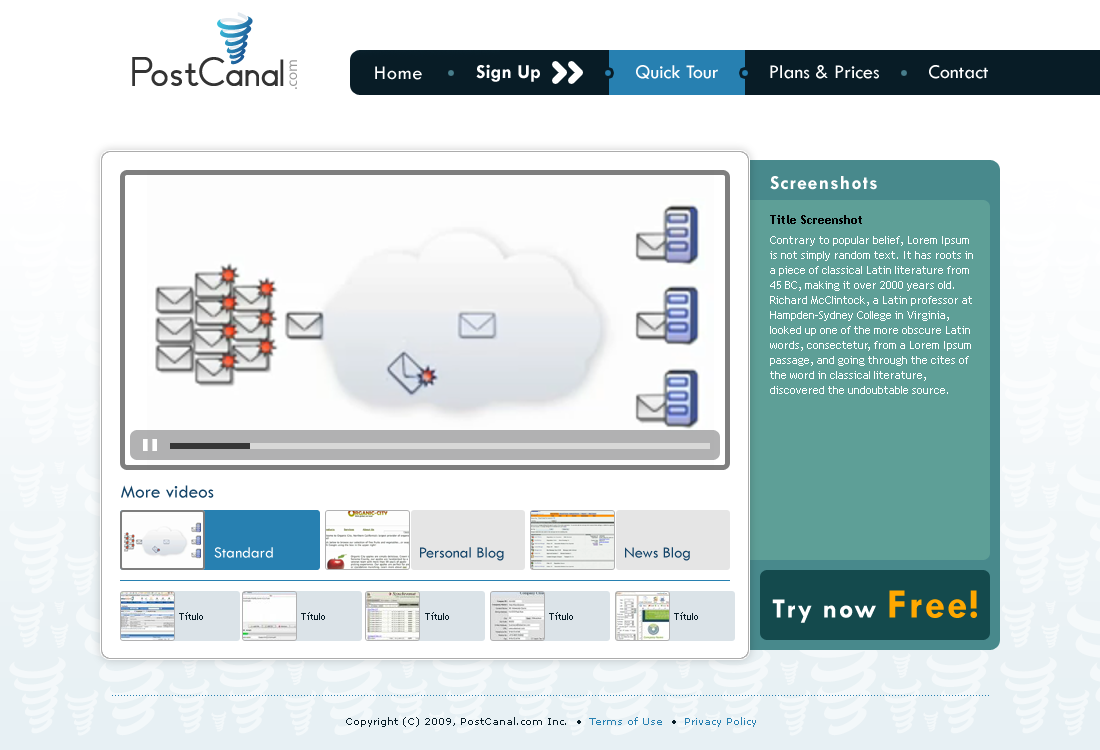
<style>
.page{position:relative;width:1100px;height:750px;background:#ffffff}
.page>*{position:absolute;margin:0}
.t1{font:20px "TwCenMT-Bold";color:#ffffff}
.t2{font:20px "TwCenMT-Regular";color:#ffffff}
.t3{font:20px "TwCenMT-Regular";letter-spacing:0.05em;color:#ffffff}
.t4{font:20px "TwCenMT-Bold";letter-spacing:0.05em;color:#ffffff}
.t5{font:12px "TrebuchetMS-Bold";color:#000000}
.t6{font:11px/15px "TrebuchetMS";color:#ffffff}
.t7{font:19px "TwCenMT-Regular";color:#124368}
.t8{font:16px "TwCenMT-Regular";color:#ffffff}
.t9{font:16px "TwCenMT-Regular";color:#124368}
.t10{font:28px "TwCenMT-Bold";letter-spacing:0.05em;color:#ffffff}
.t11{font:42px "TwCenMT-Bold";letter-spacing:0.05em;color:#ffa800}
.t12{font:10px "TrebuchetMS";color:#081c26}
.t13{font:10px "Verdana";color:#081c26}
.t14{font:10px "Verdana";color:#2780b1}
</style>
<div class="page">
<p class="t1" style="left:476px;top:64px;width:64px;height:18px">Sign Up</p>
<p class="t2" style="left:636px;top:65px;width:82px;height:14px">Quick Tour</p>
<p class="t2" style="left:770px;top:65px;width:109px;height:14px">Plans &amp; Prices</p>
<p class="t2" style="left:929px;top:65px;width:59px;height:14px">Contact</p>
<p class="t3" style="left:375px;top:66px;width:47px;height:14px">Home</p>
<p class="t4" style="left:770px;top:176px;width:107px;height:14px">Screenshots</p>
<p class="t5" style="left:770px;top:215px;width:92px;height:9px">Title Screenshot</p>
<p class="t6" style="left:770px;top:236px;width:203px;height:158px">Contrary to popular belief, Lorem Ipsum is not simply random text. It has roots in a piece of classical Latin literature from 45 BC, making it over 2000 years old. Richard McClintock, a Latin professor at Hampden-Sydney College in Virginia, looked up one of the more obscure Latin words, consectetur, from a Lorem Ipsum passage, and going through the cites of the word in classical literature, discovered the undoubtable source.</p>
<p class="t7" style="left:121px;top:485px;width:93px;height:13px">More videos</p>
<p class="t8" style="left:214px;top:547px;width:59px;height:11px">Standard</p>
<p class="t9" style="left:420px;top:547px;width:84px;height:14px">Personal Blog</p>
<p class="t9" style="left:625px;top:547px;width:65px;height:14px">News Blog</p>
<p class="t10" style="left:772px;top:590px;width:205px;height:33px">Try now <span class="t11">Free!</span></p>
<p class="t12" style="left:179px;top:612px;width:24px;height:8px">Título</p>
<p class="t12" style="left:301px;top:612px;width:24px;height:8px">Título</p>
<p class="t12" style="left:425px;top:612px;width:24px;height:8px">Título</p>
<p class="t12" style="left:549px;top:612px;width:24px;height:8px">Título</p>
<p class="t12" style="left:674px;top:612px;width:24px;height:8px">Título</p>
<p class="t13" style="left:346px;top:717px;width:410px;height:10px">Copyright (C) 2009, PostCanal.com Inc.  • <span class="t14"> Terms of Use</span>  •  <span class="t14">Privacy Policy</span></p>
</div>
